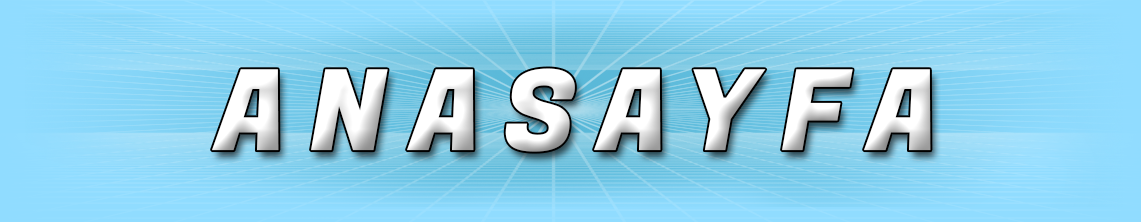
<style>
.page{position:relative;width:1141px;height:222px}
.page>*{position:absolute;margin:0}
.t1{font:112px "FugazOne-Regular";letter-spacing:0.2em;color:#ffffff}
</style>
<div class="page">
<p class="t1" style="left:212px;top:68px;width:719px;height:84px">ANASAYFA</p>
</div>
